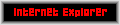
<style>
.page{position:relative;width:120px;height:25px;background:#000000}
.page>*{position:absolute;margin:0}
.t1{font:10px "04b19";color:#ff0000}
</style>
<div class="page">
<p class="t1" style="left:14px;top:8px;width:93px;height:9px">Internet Explorer</p>
</div>
